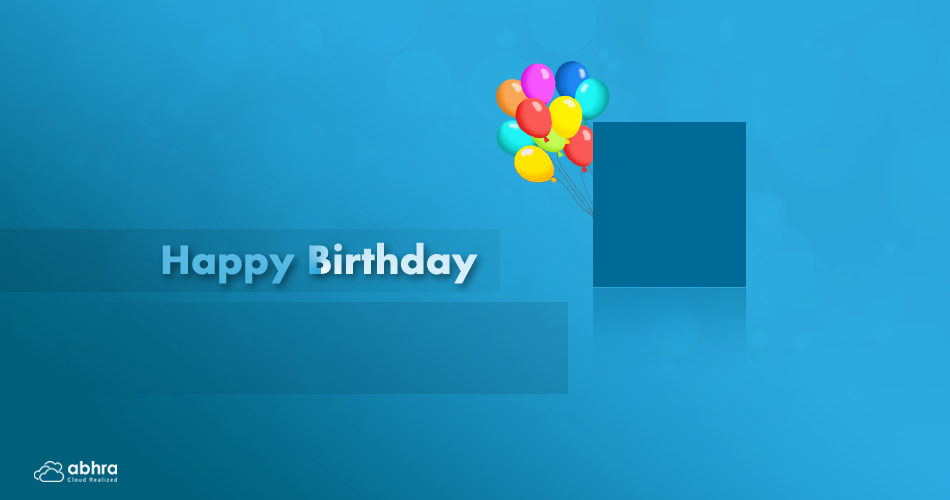
<style>
.page{position:relative;width:950px;height:500px}
.page>*{position:absolute;margin:0}
.t1{font:42.1px "Aharoni-Bold"}
</style>
<div class="page">
<p class="t1" style="left:162px;top:242px;width:316px;height:42px">Happy Birthday</p>
</div>
